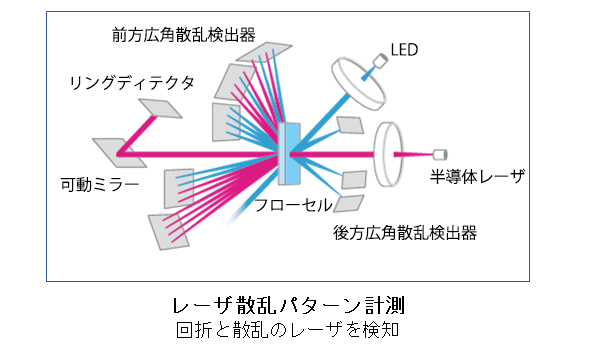
<style>
.page{position:relative;width:613px;height:352px;background:#ffffff}
.page>*{position:absolute;margin:0}
.t1{font:16px "KozGoPr6N-Regular";color:#000000}
</style>
<div class="page">
<p class="t1" style="left:112px;top:26px;width:144px;height:16px">前方広角散乱検出器</p>
<p class="t1" style="left:391px;top:43px;width:27px;height:13px">LED</p>
<p class="t1" style="left:71px;top:74px;width:123px;height:17px">リングディテクタ</p>
<p class="t1" style="left:430px;top:168px;width:96px;height:16px">半導体レーザ</p>
<p class="t1" style="left:60px;top:177px;width:79px;height:15px">可動ミラー</p>
<p class="t1" style="left:255px;top:198px;width:78px;height:14px">フローセル</p>
<p class="t1" style="left:333px;top:224px;width:144px;height:16px">後方広角散乱検出器</p>
</div>
